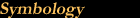
<style>
.page{position:relative;width:140px;height:18px;background:#000000}
.page>*{position:absolute;margin:0}
.t1{font:18px "Garamond-Bold";color:#fec45f;font-style:italic}
</style>
<div class="page">
<p class="t1" style="left:0px;top:2px;width:85px;height:17px">Symbology</p>
</div>
